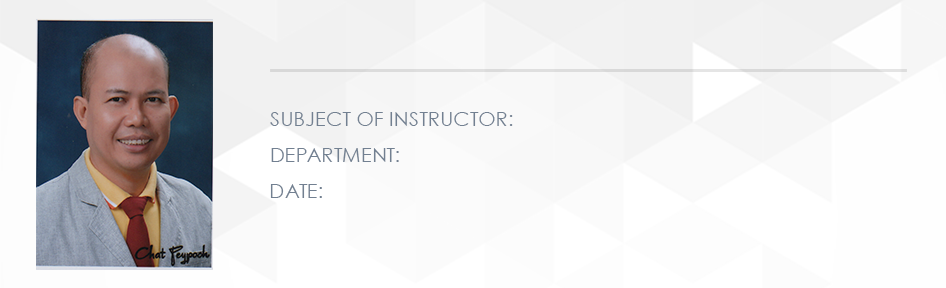
<style>
.page{position:relative;width:946px;height:288px}
.page>*{position:absolute;margin:0}
.t1{font:20px "CenturyGothic";color:#728091;text-transform:uppercase}
</style>
<div class="page">
<p class="t1" style="left:270px;top:112px;width:243px;height:14px">SUBJECT OF INSTRUCTOR:</p>
<p class="t1" style="left:271px;top:148px;width:128px;height:14px">department:</p>
<p class="t1" style="left:270px;top:184px;width:52px;height:14px">date:</p>
</div>
